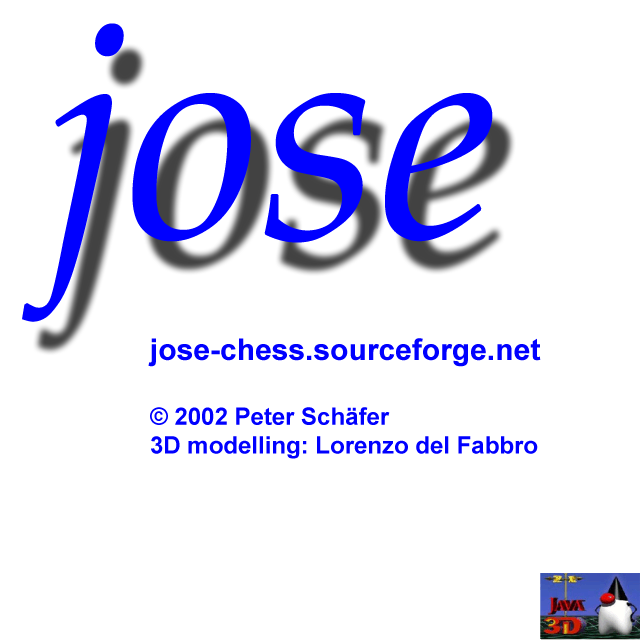
<style>
.page{position:relative;width:640px;height:640px;background:#ffffff}
.page>*{position:absolute;margin:0}
.t1{font:303.7px "PalatinoLinotype-Italic";color:#0000ff}
.t2{font:24px "Arial-BoldMT";color:#0000ff}
.t3{font:30px "Arial-BoldMT";color:#0000ff}
</style>
<div class="page">
<p class="t1" style="left:22px;top:23px;width:471px;height:299px">jose</p>
<p class="t2" style="left:148px;top:338px;width:393px;height:121px"><span class="t3">jose-chess.sourceforge.net<br><br></span>© 2002 Peter Schäfer<br>3D modelling: Lorenzo del Fabbro</p>
</div>
